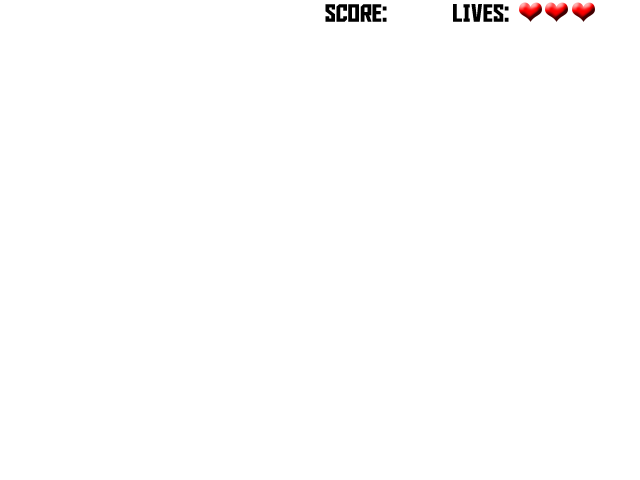
<style>
.page{position:relative;width:640px;height:480px;background:#ffffff}
.page>*{position:absolute;margin:0}
.t1{font:25px "AldotheApache";color:#000000}
</style>
<div class="page">
<p class="t1" style="left:325px;top:4px;width:62px;height:18px">SCORE:</p>
<p class="t1" style="left:453px;top:4px;width:56px;height:18px">LIVES:</p>
</div>
